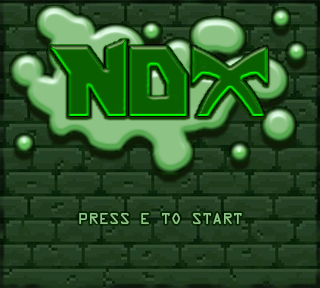
<style>
.page{position:relative;width:320px;height:288px}
.page>*{position:absolute;margin:0}
.t1{font:14px "OCRAStd";letter-spacing:-0.025em;color:#8ec386;scale:1.06 1}
</style>
<div class="page">
<p class="t1" style="left:79px;top:213px;width:163px;height:11px">PRESS E TO START</p>
</div>
